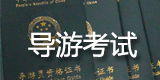
<style>
.page{position:relative;width:160px;height:80px}
.page>*{position:absolute;margin:0}
.t1{font:26.7px "MicrosoftYaHei";color:#ffffff}
</style>
<div class="page">
<p class="t1" style="left:28px;top:31px;width:109px;height:27px">导游考试</p>
</div>
